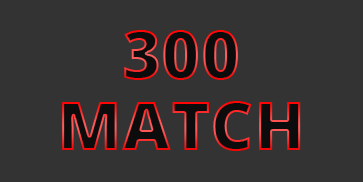
<style>
.page{position:relative;width:363px;height:182px;background:#333333}
.page>*{position:absolute;margin:0}
.t1{font:67px "OpenSans-Extrabold"}
</style>
<div class="page">
<p class="t1" style="left:124px;top:30px;width:114px;height:50px">300</p>
<p class="t1" style="left:62px;top:101px;width:239px;height:50px">MATCH</p>
</div>
